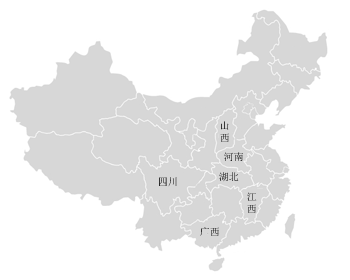
<style>
.page{position:relative;width:350px;height:280px;background:#ffffff}
.page>*{position:absolute;margin:0}
.t1{font:10px "SimSun"}
</style>
<div class="page">
<p class="t1" style="left:220px;top:121px;width:9px;height:21px">山<br>西</p>
<p class="t1" style="left:224px;top:152px;width:19px;height:9px">河南</p>
<p class="t1" style="left:219px;top:172px;width:20px;height:10px">湖北</p>
<p class="t1" style="left:159px;top:177px;width:18px;height:10px">四川</p>
<p class="t1" style="left:247px;top:192px;width:10px;height:21px">江<br>西</p>
<p class="t1" style="left:200px;top:227px;width:19px;height:9px">广西</p>
</div>
